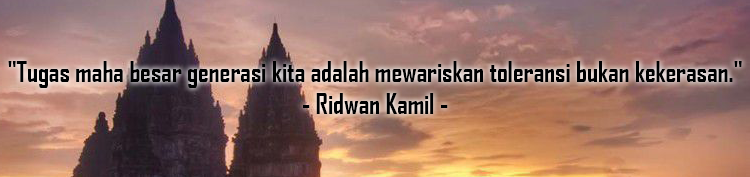
<style>
.page{position:relative;width:750px;height:177px}
.page>*{position:absolute;margin:0}
.t1{font:26.6px "AgencyFB-Bold";color:#000102}
</style>
<div class="page">
<p class="t1" style="left:8px;top:61px;width:734px;height:53px;text-align:center">"Tugas maha besar generasi kita adalah mewariskan toleransi bukan kekerasan."<br>- Ridwan Kamil -</p>
</div>
